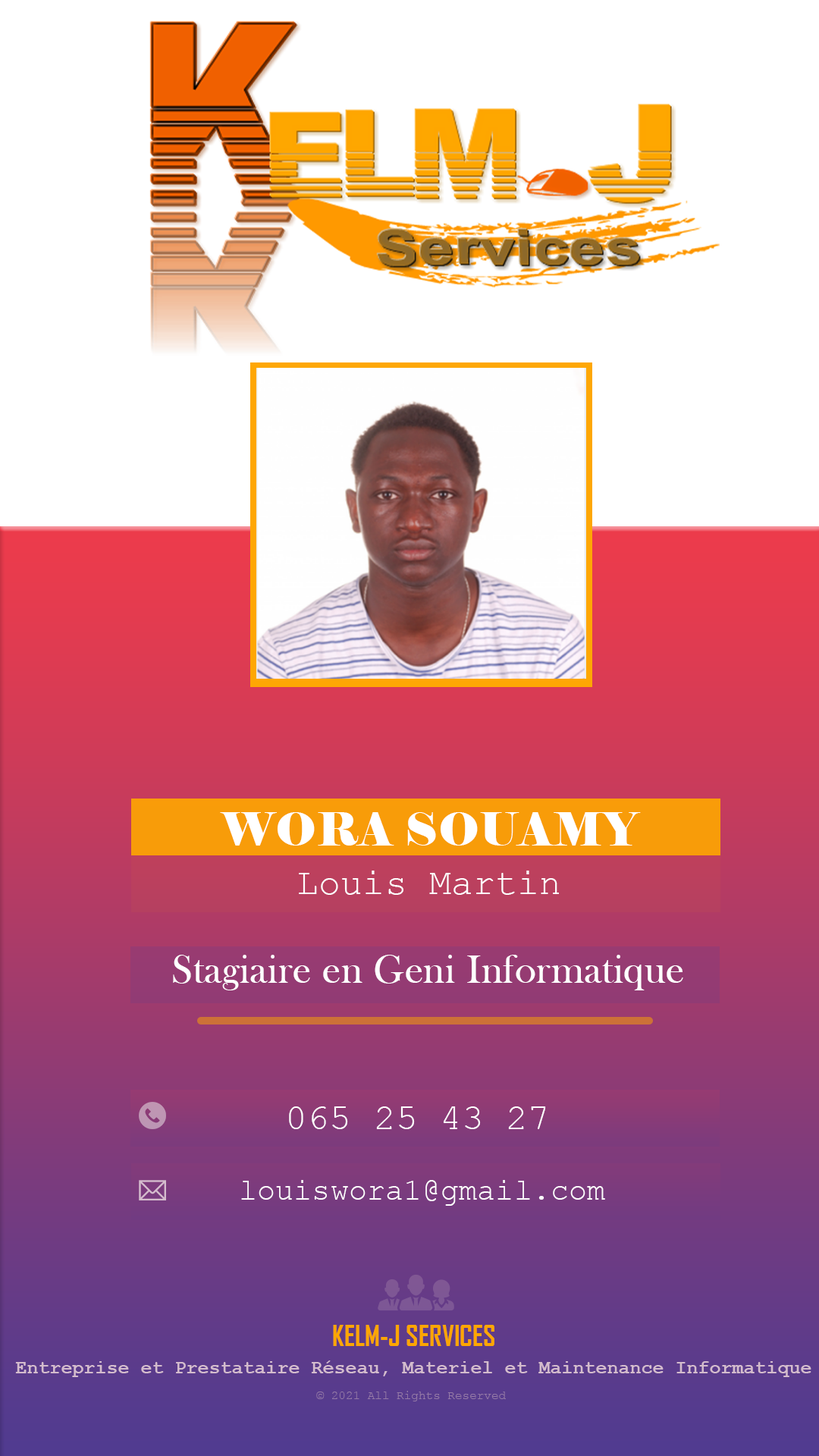
<style>
.page{position:relative;width:819px;height:1456px;background:#ffffff}
.page>*{position:absolute;margin:0}
.t1{font:45.5px "Elephant-Regular";letter-spacing:0.01em;color:#ffffff}
.t2{font:36.4px "CourierNewPSMT";letter-spacing:0.005em;color:#ffffff}
.t3{font:40.9px "BaskOldFace";letter-spacing:0.01em;color:#ffffff}
.t4{font:30.3px "CourierNewPSMT";letter-spacing:0.005em;color:#ffffff}
.t5{font:27.3px "AgencyFB-Bold";color:#fea600}
.t6{font:19px "CourierNewPS-BoldMT";color:#ebbfdf}
.t7{font:12.1px "CourierNewPSMT";color:#957aa7}
</style>
<div class="page">
<p class="t1" style="left:220px;top:812px;width:421px;height:34px">WORA SOUAMY</p>
<p class="t2" style="left:299px;top:871px;width:260px;height:24px">Louis Martin</p>
<p class="t3" style="left:173px;top:955px;width:510px;height:35px">Stagiaire en Geni Informatique</p>
<p class="t2" style="left:289px;top:1106px;width:257px;height:23px">065 25 43 27</p>
<p class="t4" style="left:241px;top:1180px;width:364px;height:26px">louiswora1@gmail.com</p>
<p class="t5" style="left:333px;top:1325px;width:161px;height:21px">KELM-J SERVICES</p>
<p class="t6" style="left:15px;top:1360px;width:796px;height:17px">Entreprise et Prestataire Réseau, Materiel et Maintenance Informatique</p>
<p class="t7" style="left:316px;top:1391px;width:190px;height:10px">© 2021 All Rights Reserved</p>
</div>
